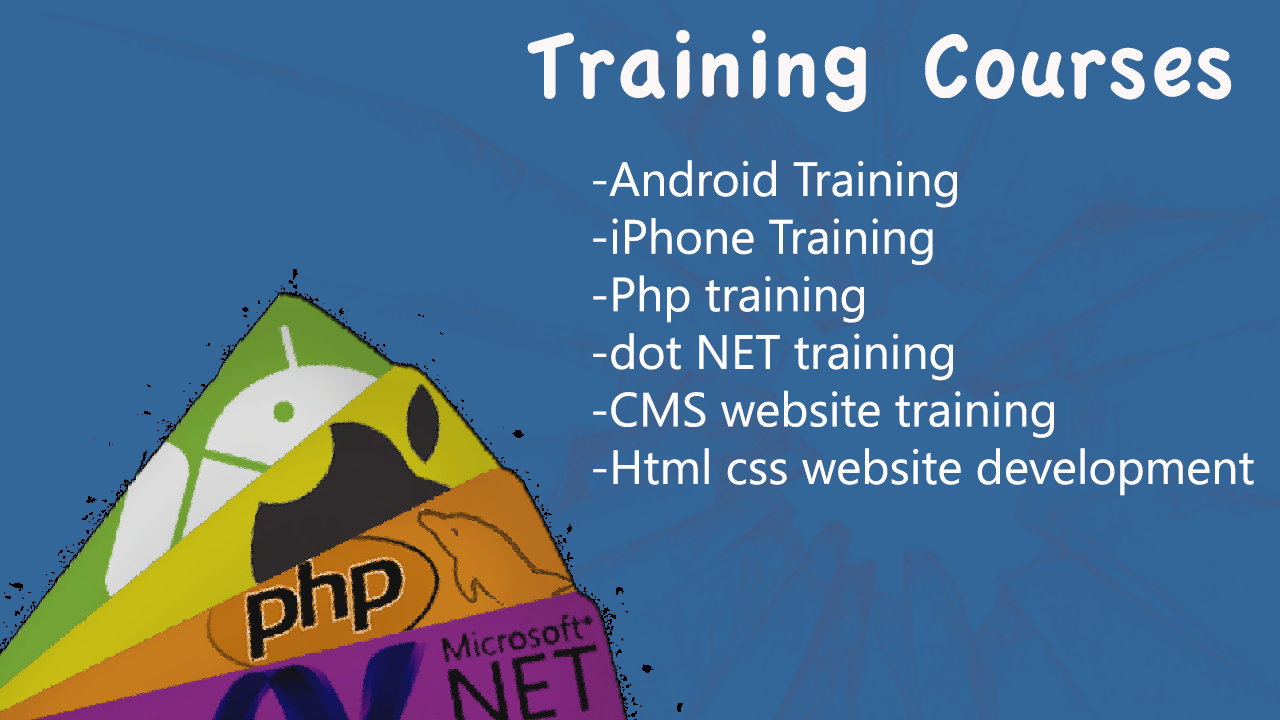
<style>
.page{position:relative;width:1280px;height:720px;background:#336699}
.page>*{position:absolute;margin:0}
.t1{font:96.9px "AppleCasual";color:#faf7f6}
.t2{font:48px "SegoeUI";color:#fdfdfd}
</style>
<div class="page">
<p class="t1" style="left:527px;top:30px;width:705px;height:82px">Training Courses</p>
<p class="t2" style="left:593px;top:160px;width:661px;height:336px">-Android Training<br>-iPhone Training<br>-Php training<br>-dot NET training<br>-CMS website training<br>-Html css website development</p>
</div>
